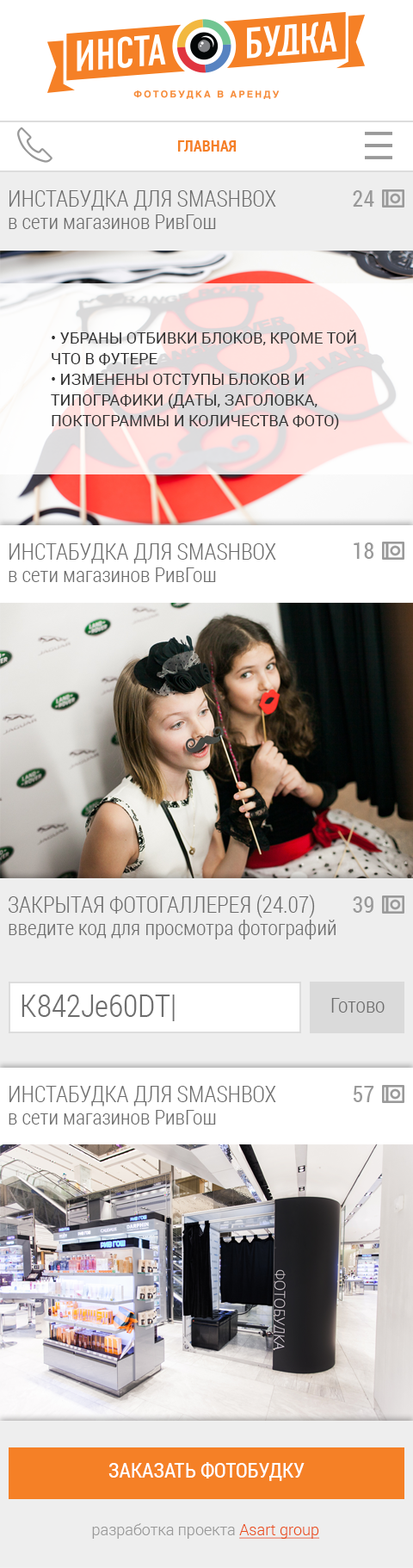
<style>
.page{position:relative;width:413px;height:1568px}
.page>*{position:absolute;margin:0}
.t1{font:15.5px "RobotoCondensed-Bold";color:#f58026}
.t2{font:22.4px "RobotoCondensed-Light";color:#6e6e6e;text-transform:uppercase}
.t3{font:22.4px "RobotoCondensed-Regular";color:#999999;text-transform:uppercase}
.t4{font:20.7px "RobotoCondensed-Light";color:#6e6e6e}
.t5{font:15.5px/20.7px "Roboto-Regular";color:#323232;text-transform:uppercase}
.t6{font:31px "RobotoCondensed-Light";color:#6e6e6e}
.t7{font:31px "RobotoCondensed-Light";color:#6e6e6e;text-transform:uppercase}
.t8{font:20.7px "RobotoCondensed-Regular";color:#ffffff;text-transform:uppercase}
.t9{font:15.5px "Roboto-Light";color:#999999}
.t10{font:15.5px "Roboto-Light";color:#e94e1b;text-decoration:underline}
</style>
<div class="page">
<p class="t1" style="left:178px;top:140px;width:59px;height:12px">ГЛАВНАЯ</p>
<p class="t2" style="left:9px;top:190px;width:267px;height:21px">Инстабудка для smashbox</p>
<p class="t3" style="left:353px;top:190px;width:22px;height:17px">24</p>
<p class="t4" style="left:9px;top:214px;width:207px;height:15px">в сети магазинов РивГош</p>
<p class="t5" style="left:51px;top:330px;width:305px;height:100px">• убраны отбивки блоков, кроме той что в футере<br>• изменены отступы блоков и типографики (даты, заголовка, поктограммы и количества фото)</p>
<p class="t2" style="left:9px;top:543px;width:267px;height:21px">Инстабудка для smashbox</p>
<p class="t3" style="left:354px;top:542px;width:20px;height:17px">18</p>
<p class="t4" style="left:9px;top:567px;width:207px;height:15px">в сети магазинов РивГош</p>
<p class="t2" style="left:9px;top:895px;width:306px;height:23px">закрытая фотогаллерея (24.07)</p>
<p class="t3" style="left:353px;top:896px;width:21px;height:17px">39</p>
<p class="t4" style="left:9px;top:920px;width:327px;height:19px">введите код для просмотра фотографий</p>
<p class="t6" style="left:22px;top:995px;width:153px;height:26px"><span class="t7">k842J</span>e60DT|</p>
<p class="t4" style="left:332px;top:998px;width:53px;height:15px">Готово</p>
<p class="t2" style="left:9px;top:1086px;width:267px;height:20px">Инстабудка для smashbox</p>
<p class="t3" style="left:354px;top:1086px;width:21px;height:16px">57</p>
<p class="t4" style="left:9px;top:1110px;width:207px;height:15px">в сети магазинов РивГош</p>
<p class="t8" style="left:108px;top:1462px;width:197px;height:19px">заказать фотобудку</p>
<p class="t9" style="left:92px;top:1523px;width:228px;height:16px">разработка проекта <span class="t10">Asart group</span></p>
</div>
